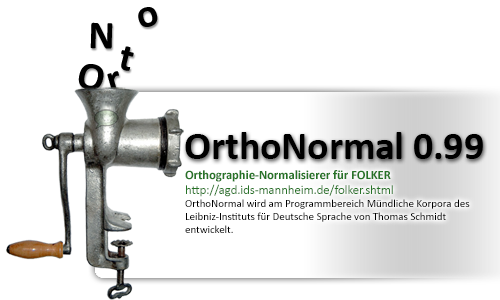
<style>
.page{position:relative;width:500px;height:300px;background:#ffffff}
.page>*{position:absolute;margin:0}
.t1{font:40px "Calibri-Bold";letter-spacing:-0.005em;color:#000000}
.t2{font:11px "Calibri";letter-spacing:-0.005em;color:#000000}
.t3{font:12.7px "Calibri-Bold";letter-spacing:-0.005em;color:#277327}
.t4{font:12.7px "Calibri";letter-spacing:-0.005em;color:#277327}
</style>
<div class="page">
<p class="t1" style="left:138px;top:7px;width:20px;height:20px;rotate:-16deg">o</p>
<p class="t1" style="left:90px;top:22px;width:23px;height:27px;rotate:1deg">N</p>
<p class="t1" style="left:121px;top:46px;width:13px;height:25px;rotate:14deg">t</p>
<p class="t1" style="left:78px;top:64px;width:26px;height:27px;rotate:14deg">O</p>
<p class="t1" style="left:107px;top:71px;width:12px;height:21px;rotate:-16deg">r</p>
<p class="t1" style="left:185px;top:132px;width:298px;height:27px">OrthoNormal 0.99</p>
<p class="t2" style="left:185px;top:170px;width:285px;height:63px"><span class="t3">Orthographie-Normalisierer für FOLKER<br></span><span class="t4">http://agd.ids-mannheim.de/folker.shtml<br></span>OrthoNormal wird am Programmbereich Mündliche Korpora des <br>Leibniz-Instituts für Deutsche Sprache von Thomas Schmidt <br>entwickelt.</p>
</div>
